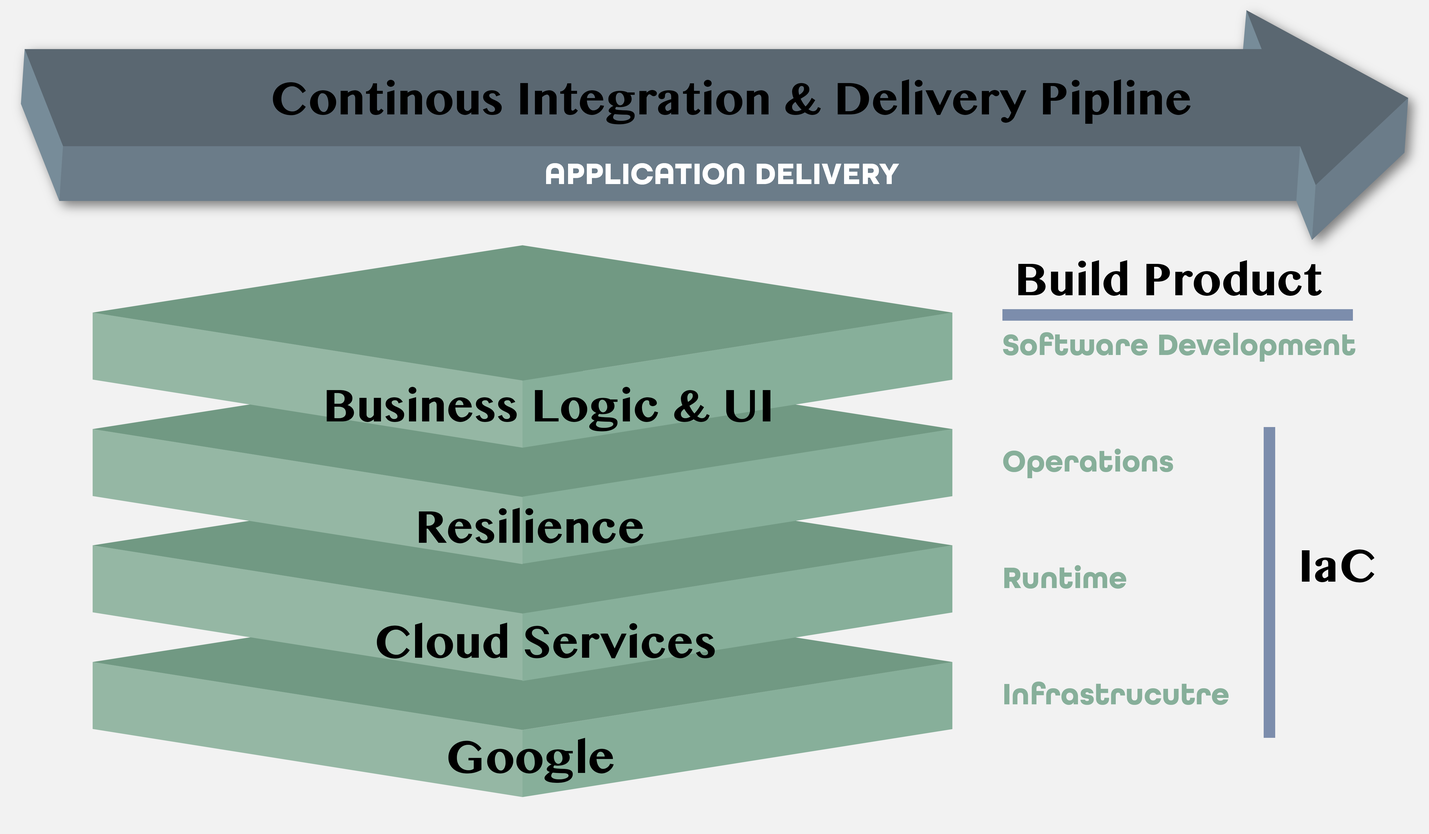
<style>
.page{position:relative;width:1429px;height:834px;background:#f2f2f2}
.page>*{position:absolute;margin:0}
.t1{font:64.3px "SinhalaMN-Bold";color:#000000}
</style>
<div class="page">
<p class="t1" style="left:273px;top:79px;width:918px;height:45px">Continous Integration &amp; Delivery Pipline</p>
<p class="t1" style="left:1018px;top:260px;width:304px;height:36px">Build Product</p>
<p class="t1" style="left:327px;top:387px;width:444px;height:44px">Business Logic &amp; UI</p>
<p class="t1" style="left:419px;top:508px;width:225px;height:36px">Resilience</p>
<p class="t1" style="left:1302px;top:550px;width:73px;height:33px">IaC</p>
<p class="t1" style="left:377px;top:623px;width:338px;height:36px">Cloud Services</p>
<p class="t1" style="left:448px;top:738px;width:166px;height:45px">Google</p>
</div>
